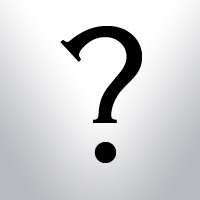
<style>
.page{position:relative;width:200px;height:200px}
.page>*{position:absolute;margin:0}
.t1{font:200px "CopperplateGothic-Light";color:#000000}
</style>
<div class="page">
<p class="t1" style="left:60px;top:26px;width:82px;height:137px">?</p>
</div>
